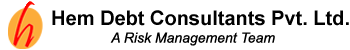
<style>
.page{position:relative;width:350px;height:50px;background:#ffffff}
.page>*{position:absolute;margin:0}
.t1{font:20px "Arial-BoldMT";color:#000000}
.t2{font:14px "Arial-ItalicMT";color:#000000}
</style>
<div class="page">
<p class="t1" style="left:52px;top:10px;width:297px;height:16px">Hem Debt Consultants Pvt. Ltd.</p>
<p class="t2" style="left:110px;top:32px;width:165px;height:14px">A Risk Management Team</p>
</div>
